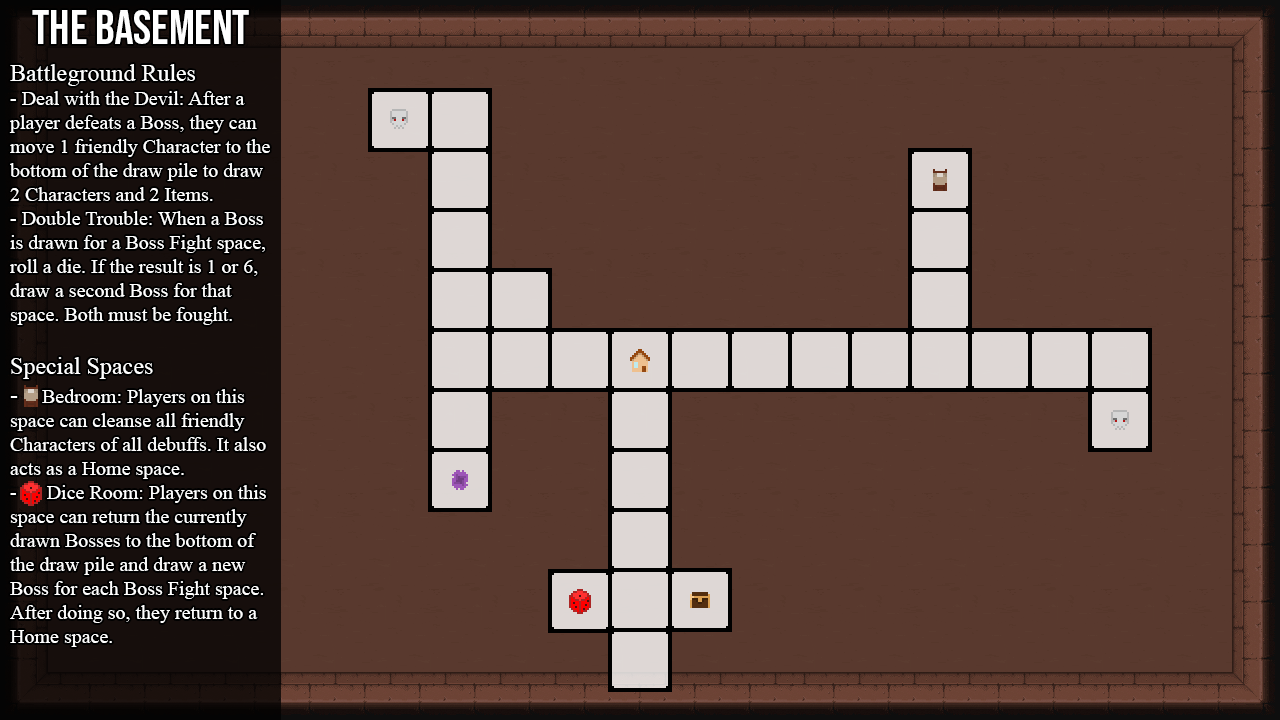
<style>
.page{position:relative;width:1280px;height:720px;background:#59392e}
.page>*{position:absolute;margin:0}
.t1{font:48px "BebasNeue-Regular";color:#ffffff}
.t2{font:20px "TimesNewRomanPSMT";color:#ffffff}
.t3{font:24px "TimesNewRomanPSMT";color:#ffffff}
</style>
<div class="page">
<p class="t1" style="left:32px;top:10px;width:217px;height:34px">The Basement</p>
<p class="t2" style="left:9px;top:64px;width:261px;height:583px"><span class="t3">Battleground Rules<br></span>- Deal with the Devil: After a<br>player defeats a Boss, they can<br>move 1 friendly Character to the<br>bottom of the draw pile to draw<br>2 Characters and 2 Items.<br>- Double Trouble: When a Boss<br>is drawn for a Boss Fight space,<br>roll a die. If the result is 1 or 6,<br>draw a second Boss for that<br>space. Both must be fought.<br><br><span class="t3">Special Spaces<br>-    </span>Bedroom: Players on this<br>space can cleanse all friendly<br>Characters of all debuffs. It also<br>acts as a Home space.<br>-      Dice Room: Players on this<br>space can return the currently<br>drawn Bosses to the bottom of<br>the draw pile and draw a new<br>Boss for each Boss Fight space.<br>After doing so, they return to a<br>Home space.</p>
</div>
